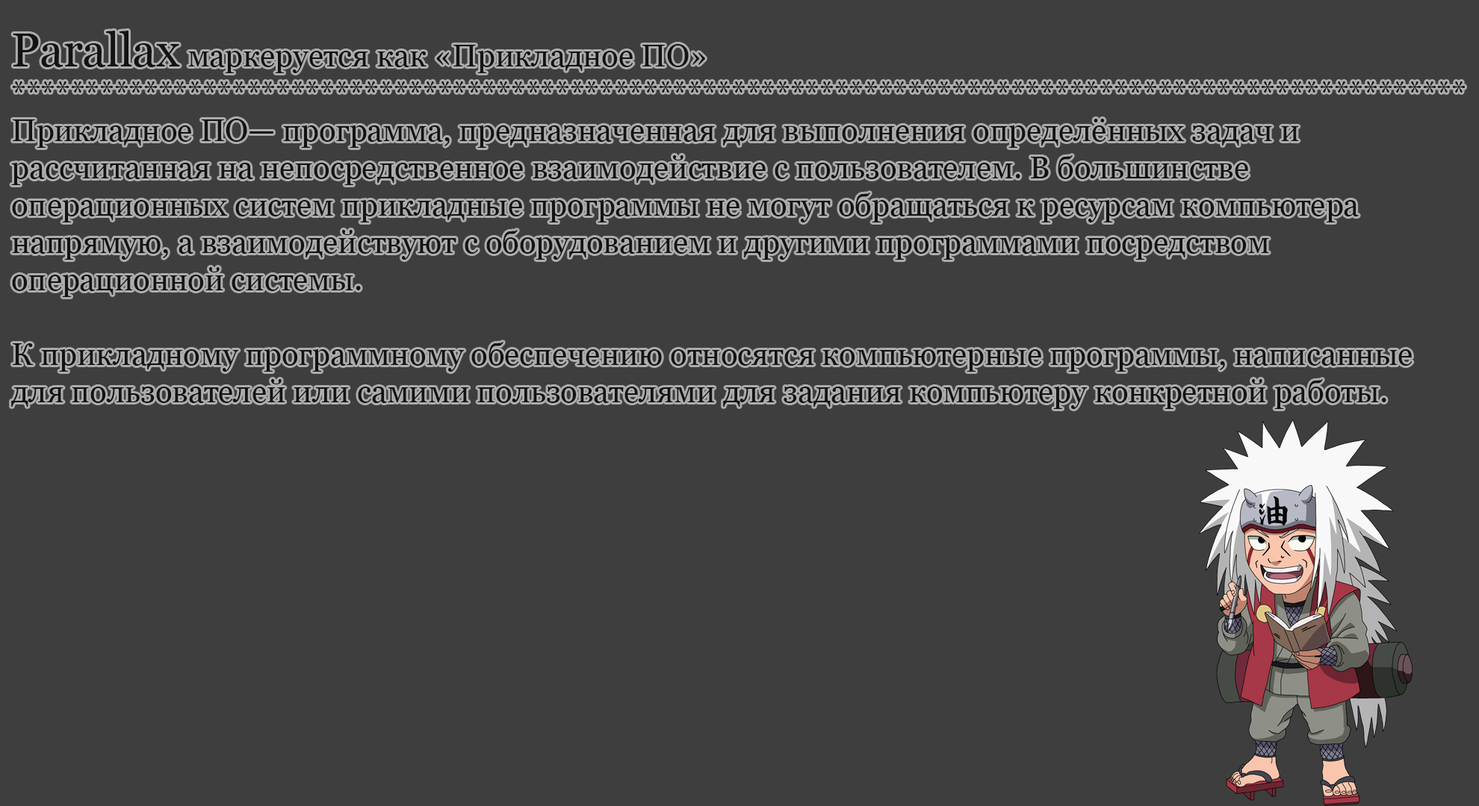
<style>
.page{position:relative;width:1479px;height:806px;background:#3e3e3e}
.page>*{position:absolute;margin:0}
.t1{font:31.1px "Georgia";color:#131313}
.t2{font:46.7px "Georgia";color:#131313}
</style>
<div class="page">
<p class="t1" style="left:11px;top:31px;width:1454px;height:378px"><span class="t2">Parallax</span> маркеруется как «Прикладное ПО»<br>***************************************************************************************************<br>Прикладное ПО— программа, предназначенная для выполнения определённых задач и рассчитанная на непосредственное взаимодействие с пользователем. В большинстве операционных систем прикладные программы не могут обращаться к ресурсам компьютера напрямую, а взаимодействуют с оборудованием и другими программами посредством операционной системы.<br><br>К прикладному программному обеспечению относятся компьютерные программы, написанные для пользователей или самими пользователями для задания компьютеру конкретной работы.</p>
</div>
